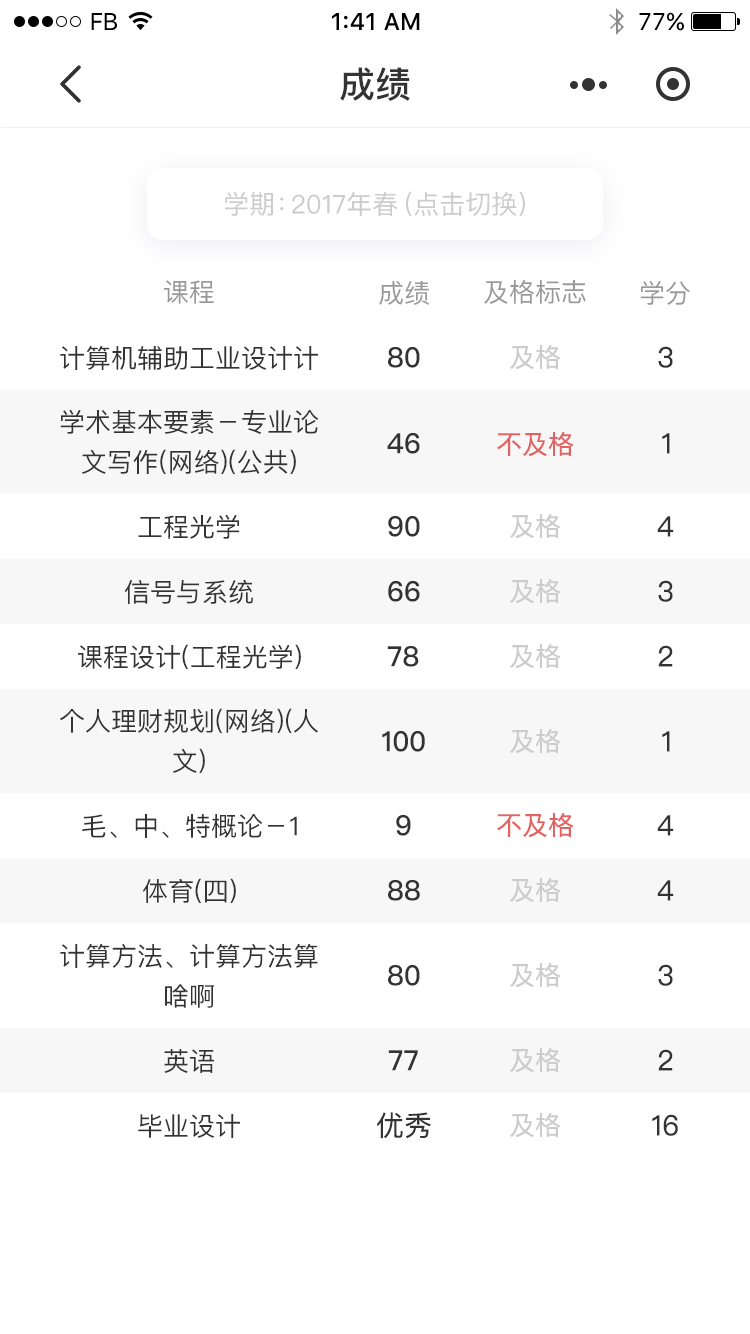
<style>
.page{position:relative;width:750px;height:1334px;background:#ffffff}
.page>*{position:absolute;margin:0}
.t1{font:24px "SFUIText-Regular";letter-spacing:-0.025em;color:#000000}
.t2{font:24px "SFUIText-Medium";color:#000000}
.t3{font:24px "SFUIText-Regular";color:#000000}
.t4{font:36px "PingFangSC-Medium";color:#333333}
.t5{font:26px "PingFangSC-Regular";color:#cccccc}
.t6{font:26px "PingFangSC-Regular";color:#999999}
.t7{font:26px "PingFangSC-Regular";color:#333333}
.t8{font:28px "PingFangSC-Medium";color:#333333}
.t9{font:28px "PingFangSC-Regular";color:#333333}
.t10{font:26px/40px "PingFangSC-Regular";color:#333333}
.t11{font:26px "PingFangSC-Regular";color:#e36363}
</style>
<div class="page">
<p class="t1" style="left:91px;top:13px;width:26px;height:17px">FB</p>
<p class="t2" style="left:332px;top:13px;width:88px;height:17px">1:41 AM</p>
<p class="t3" style="left:639px;top:12px;width:45px;height:19px">77%</p>
<p class="t4" style="left:340px;top:67px;width:70px;height:34px">成绩</p>
<p class="t5" style="left:225px;top:191px;width:59px;height:25px">学期：</p>
<p class="t5" style="left:292px;top:192px;width:106px;height:25px">2017年春</p>
<p class="t5" style="left:406px;top:191px;width:119px;height:26px">(点击切换）</p>
<p class="t6" style="left:164px;top:280px;width:50px;height:24px">课程</p>
<p class="t6" style="left:379px;top:281px;width:50px;height:24px">成绩</p>
<p class="t6" style="left:484px;top:280px;width:102px;height:24px">及格标志</p>
<p class="t6" style="left:640px;top:280px;width:50px;height:25px">学分</p>
<p class="t7" style="left:60px;top:345px;width:258px;height:25px">计算机辅助工业设计计</p>
<p class="t8" style="left:388px;top:346px;width:32px;height:22px">80</p>
<p class="t5" style="left:510px;top:345px;width:51px;height:25px">及格</p>
<p class="t9" style="left:658px;top:346px;width:15px;height:22px">3</p>
<p class="t10" style="left:60px;top:409px;width:259px;height:66px;text-align:center">学术基本要素-专业论<br>文写作(网络)(公共)</p>
<p class="t8" style="left:387px;top:432px;width:33px;height:22px">46</p>
<p class="t11" style="left:497px;top:432px;width:77px;height:25px">不及格</p>
<p class="t9" style="left:662px;top:433px;width:8px;height:21px">1</p>
<p class="t7" style="left:138px;top:514px;width:102px;height:25px">工程光学</p>
<p class="t8" style="left:388px;top:515px;width:32px;height:22px">90</p>
<p class="t5" style="left:510px;top:514px;width:51px;height:25px">及格</p>
<p class="t9" style="left:657px;top:516px;width:17px;height:21px">4</p>
<p class="t7" style="left:124px;top:579px;width:129px;height:25px">信号与系统</p>
<p class="t8" style="left:388px;top:580px;width:32px;height:22px">66</p>
<p class="t5" style="left:510px;top:579px;width:51px;height:25px">及格</p>
<p class="t9" style="left:658px;top:580px;width:15px;height:22px">3</p>
<p class="t7" style="left:78px;top:644px;width:223px;height:26px">课程设计(工程光学)</p>
<p class="t8" style="left:387px;top:645px;width:32px;height:22px">78</p>
<p class="t5" style="left:510px;top:644px;width:51px;height:25px">及格</p>
<p class="t9" style="left:658px;top:645px;width:15px;height:22px">2</p>
<p class="t10" style="left:60px;top:708px;width:258px;height:65px;text-align:center">个人理财规划(网络)(人<br>文)</p>
<p class="t8" style="left:382px;top:730px;width:43px;height:22px">100</p>
<p class="t5" style="left:510px;top:729px;width:51px;height:25px">及格</p>
<p class="t9" style="left:662px;top:731px;width:8px;height:21px">1</p>
<p class="t7" style="left:82px;top:814px;width:215px;height:24px">毛、中、特概论-1</p>
<p class="t8" style="left:396px;top:814px;width:15px;height:22px">9</p>
<p class="t11" style="left:497px;top:813px;width:77px;height:25px">不及格</p>
<p class="t9" style="left:657px;top:815px;width:17px;height:21px">4</p>
<p class="t7" style="left:143px;top:878px;width:93px;height:26px">体育(四)</p>
<p class="t8" style="left:388px;top:879px;width:32px;height:22px">88</p>
<p class="t5" style="left:510px;top:878px;width:51px;height:25px">及格</p>
<p class="t9" style="left:657px;top:880px;width:17px;height:21px">4</p>
<p class="t10" style="left:60px;top:943px;width:258px;height:65px;text-align:center">计算方法、计算方法算<br>啥啊</p>
<p class="t8" style="left:388px;top:964px;width:32px;height:22px">80</p>
<p class="t5" style="left:510px;top:963px;width:51px;height:25px">及格</p>
<p class="t9" style="left:658px;top:964px;width:15px;height:22px">3</p>
<p class="t7" style="left:164px;top:1049px;width:50px;height:24px">英语</p>
<p class="t5" style="left:510px;top:1048px;width:51px;height:25px">及格</p>
<p class="t9" style="left:658px;top:1049px;width:15px;height:22px">2</p>
<p class="t8" style="left:388px;top:1050px;width:30px;height:21px">77</p>
<p class="t7" style="left:138px;top:1114px;width:102px;height:24px">毕业设计</p>
<p class="t9" style="left:377px;top:1112px;width:54px;height:27px">优秀</p>
<p class="t5" style="left:510px;top:1113px;width:51px;height:25px">及格</p>
<p class="t9" style="left:652px;top:1114px;width:26px;height:22px">16</p>
</div>
